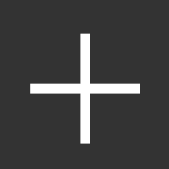
<style>
.page{position:relative;width:169px;height:169px;background:#333333}
.page>*{position:absolute;margin:0}
.t1{font:150px "KozGoPr6N-Regular";color:#ffffff;text-transform:uppercase}
</style>
<div class="page">
<p class="t1" style="left:30px;top:33px;width:110px;height:111px">＋</p>
</div>
